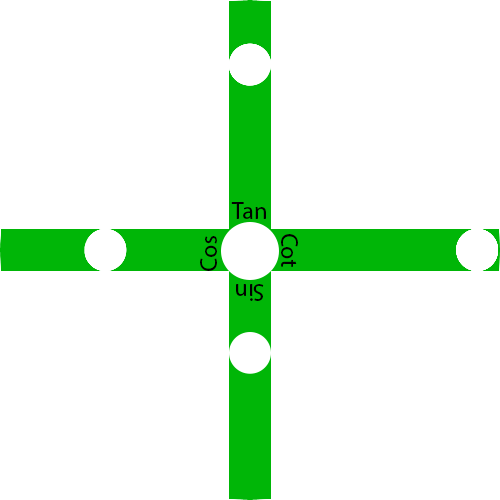
<style>
.page{position:relative;width:500px;height:500px;background:#ffffff}
.page>*{position:absolute;margin:0}
.t1{font:24px "MyriadPro-Regular";color:#000000}
</style>
<div class="page">
<p class="t1" style="left:231px;top:202px;width:35px;height:17px">Tan</p>
<p class="t1" style="left:200px;top:236px;width:17px;height:35px;rotate:-90deg">Cos</p>
<p class="t1" style="left:281px;top:234px;width:17px;height:33px;rotate:90deg">Cot</p>
<p class="t1" style="left:236px;top:284px;width:28px;height:17px;rotate:180deg">Sin</p>
</div>
